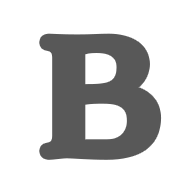
<style>
.page{position:relative;width:192px;height:192px;background:#ffffff}
.page>*{position:absolute;margin:0}
.t1{font:150px "AdornSSerif";color:#585858;font-weight:bold}
</style>
<div class="page">
<p class="t1" style="left:43px;top:37px;width:115px;height:119px">B</p>
</div>
